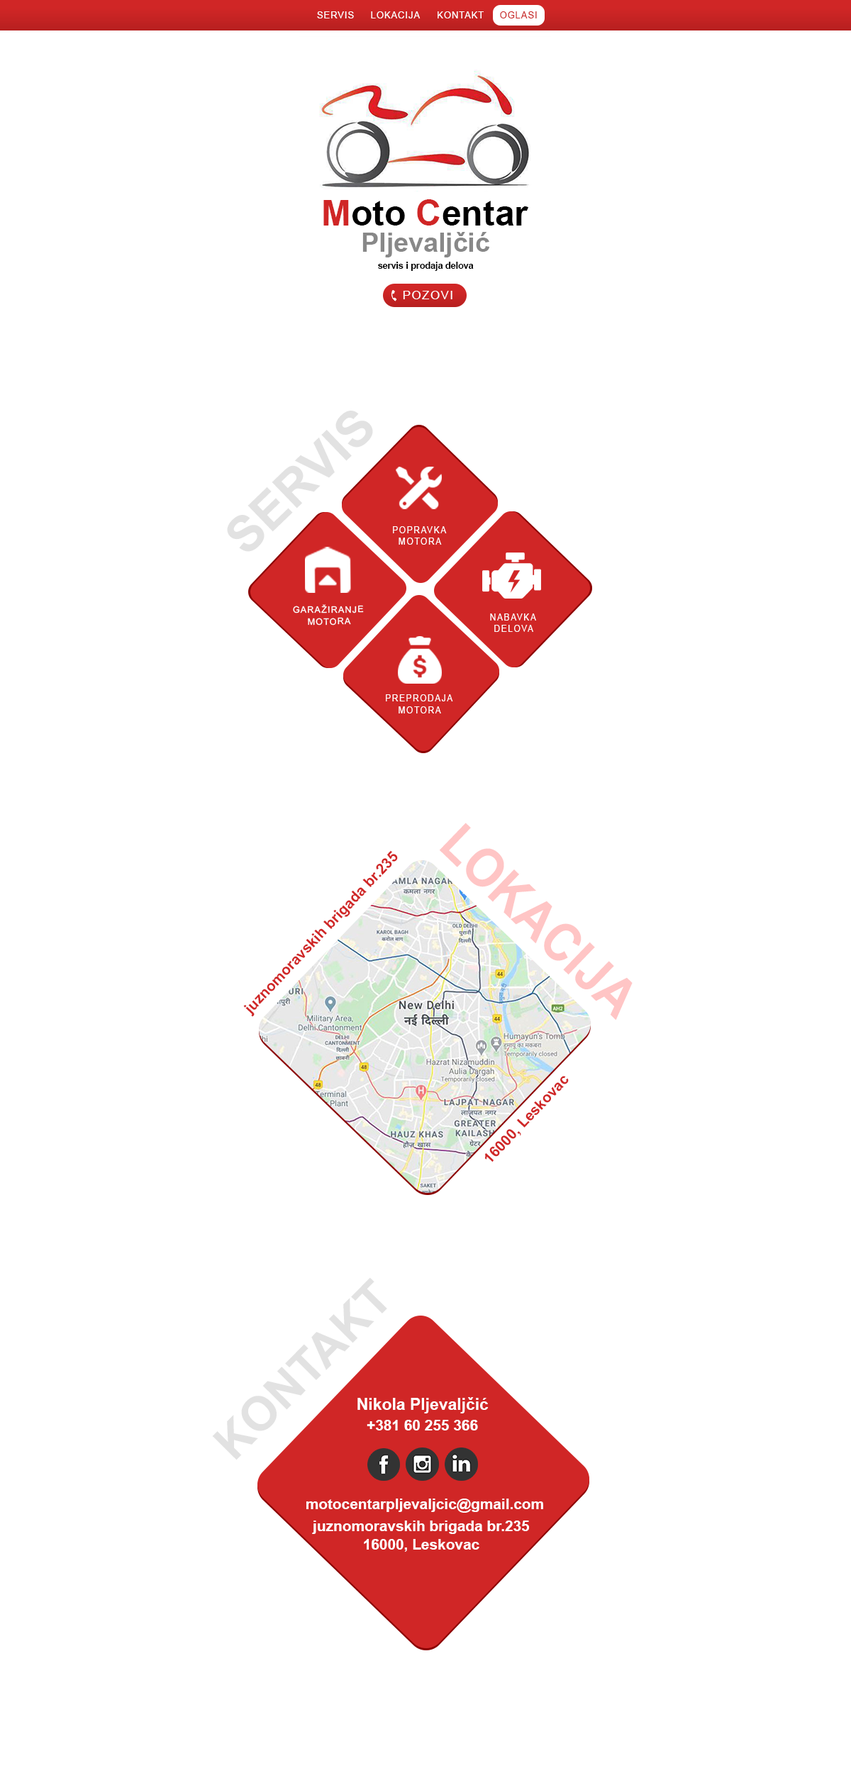
<style>
.page{position:relative;width:851px;height:1773px;background:#ffffff}
.page>*{position:absolute;margin:0}
.t1{font:8.9px "ArialMT";letter-spacing:0.1em;color:#fefefe}
.t2{font:8.9px "ArialMT";letter-spacing:0.1em;color:#c92424}
.t3{font:35.5px "Arial-BoldMT";color:#000000}
.t4{font:35.5px "Arial-BoldMT";color:#d02626}
.t5{font:26.6px "Arial-BoldMT";color:#888888}
.t6{font:8.9px "Arial-BoldMT";color:#000000}
.t7{font:11.8px "ArialMT";letter-spacing:0.1em;color:#fefefe}
.t8{font:8.9px "ArialMT";letter-spacing:0.1em;color:#ffffff}
.t9{font:9px "ArialMT";letter-spacing:0.1em;color:#ffffff}
.t10{font:53.2px "Arial-BoldMT";color:#ffc5c5;scale:0.92 1}
.t11{font:14.7px "Arial-BoldMT";color:#d02626}
.t12{font:16.3px "Arial-BoldMT";color:#ffffff}
.t13{font:14.8px "Arial-BoldMT";color:#ffffff}
</style>
<div class="page">
<p class="t1" style="left:317px;top:11px;width:37px;height:7px">SERVIS</p>
<p class="t1" style="left:371px;top:11px;width:50px;height:7px">LOKACIJA</p>
<p class="t1" style="left:438px;top:11px;width:46px;height:7px">KONTAKT</p>
<p class="t2" style="left:500px;top:11px;width:37px;height:7px">OGLASI</p>
<p class="t3" style="left:323px;top:199px;width:205px;height:27px"><span class="t4">M</span>oto <span class="t4">C</span>entar</p>
<p class="t5" style="left:362px;top:232px;width:128px;height:25px">Pljevaljčić</p>
<p class="t6" style="left:378px;top:262px;width:96px;height:9px">servis i prodaja delova</p>
<p class="t7" style="left:403px;top:291px;width:50px;height:8px">POZOVI</p>
<p class="t8" style="left:393px;top:526px;width:54px;height:7px">POPRAVKA</p>
<p class="t8" style="left:399px;top:538px;width:43px;height:7px">MOTORA</p>
<p class="t8" style="left:293px;top:604px;width:71px;height:10px;rotate:-1deg">GARAŽIRANJE</p>
<p class="t8" style="left:308px;top:617px;width:43px;height:9px;rotate:-1deg">MOTORA</p>
<p class="t8" style="left:490px;top:614px;width:46px;height:7px">NABAVKA</p>
<p class="t8" style="left:494px;top:625px;width:39px;height:7px">DELOVA</p>
<p class="t9" style="left:386px;top:694px;width:67px;height:7px">PREPRODAJA</p>
<p class="t9" style="left:399px;top:706px;width:42px;height:8px">MOTORA</p>
<p class="t10" style="left:439px;top:823px;width:194px;height:198px;rotate:44deg">LOKACIJA</p>
<p class="t11" style="left:243px;top:850px;width:155px;height:167px;rotate:-47deg">juznomoravskih brigada br.235</p>
<p class="t11" style="left:484px;top:1076px;width:85px;height:87px;rotate:-47deg">16000, Leskovac</p>
<p class="t12" style="left:357px;top:1397px;width:132px;height:17px">Nikola Pljevaljčić</p>
<p class="t13" style="left:367px;top:1420px;width:111px;height:11px">+381 60 255 366</p>
<p class="t13" style="left:306px;top:1499px;width:237px;height:14px">motocentarpljevaljcic@gmail.com</p>
<p class="t13" style="left:312px;top:1521px;width:217px;height:13px">juznomoravskih brigada br.235</p>
<p class="t13" style="left:364px;top:1539px;width:115px;height:13px">16000, Leskovac</p>
</div>
